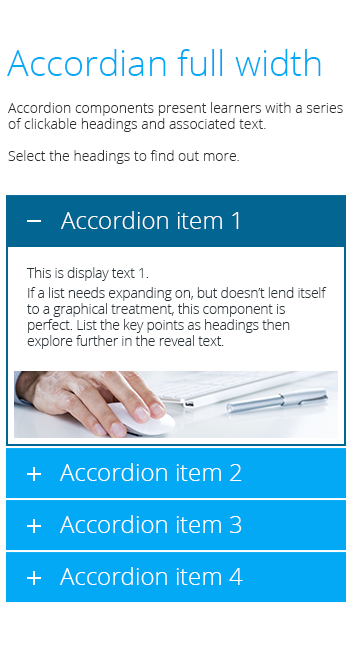
<style>
.page{position:relative;width:350px;height:648px;background:#ffffff}
.page>*{position:absolute;margin:0}
.t1{font:36px "OpenSans-Light";color:#03a9f4}
.t2{font:14px/16px "OpenSans-Light";color:#2e2c2b}
.t3{font:24px "OpenSans-Light";color:#ffffff}
.t4{font:14px/16px "OpenSans-Light";letter-spacing:-0.02em;color:#263238}
</style>
<div class="page">
<p class="t1" style="left:7px;top:49px;width:314px;height:27px">Accordian full width</p>
<p class="t2" style="left:8px;top:102px;width:335px;height:62px">Accordion components present learners with a series of clickable headings and associated text. <br><br>Select the headings to find out more.</p>
<p class="t3" style="left:61px;top:211px;width:178px;height:18px">Accordion item 1</p>
<p class="t4" style="left:26px;top:267px;width:301px;height:82px">This is display text 1.<br>If a list needs expanding on, but doesn’t lend itself to a graphical treatment, this component is perfect. List the key points as headings then explore further in the reveal text.</p>
<p class="t3" style="left:60px;top:463px;width:182px;height:18px">Accordion item 2</p>
<p class="t3" style="left:60px;top:515px;width:182px;height:18px">Accordion item 3</p>
<p class="t3" style="left:60px;top:567px;width:183px;height:18px">Accordion item 4</p>
</div>
